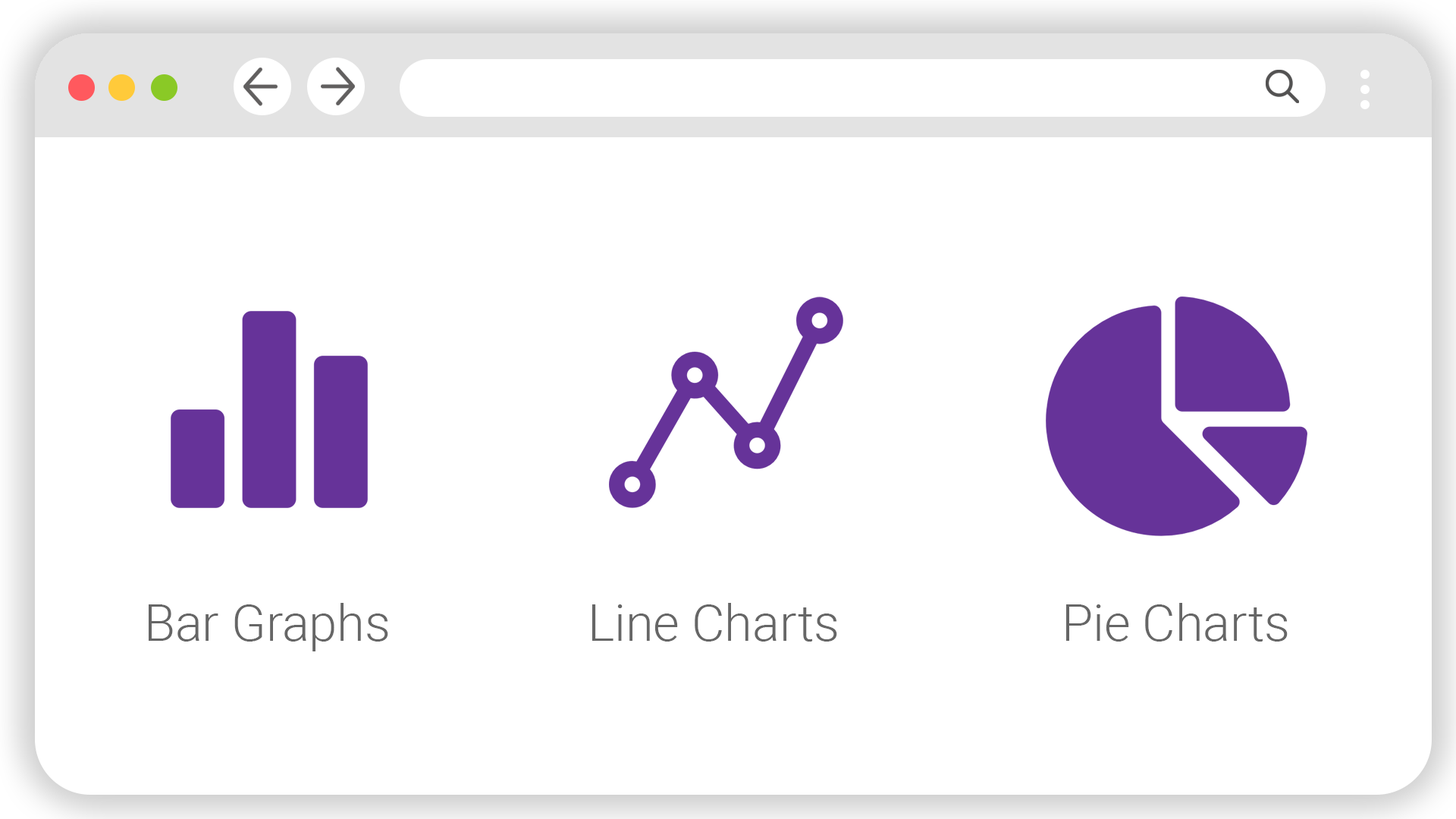
<style>
.page{position:relative;width:1456px;height:819px;background:#ffffff}
.page>*{position:absolute;margin:0}
.t1{font:50.6px "Roboto-Light";color:#666666}
</style>
<div class="page">
<p class="t1" style="left:149px;top:603px;width:239px;height:48px">Bar Graphs</p>
<p class="t1" style="left:592px;top:603px;width:245px;height:39px">Line Charts</p>
<p class="t1" style="left:1066px;top:603px;width:222px;height:39px">Pie Charts</p>
</div>
